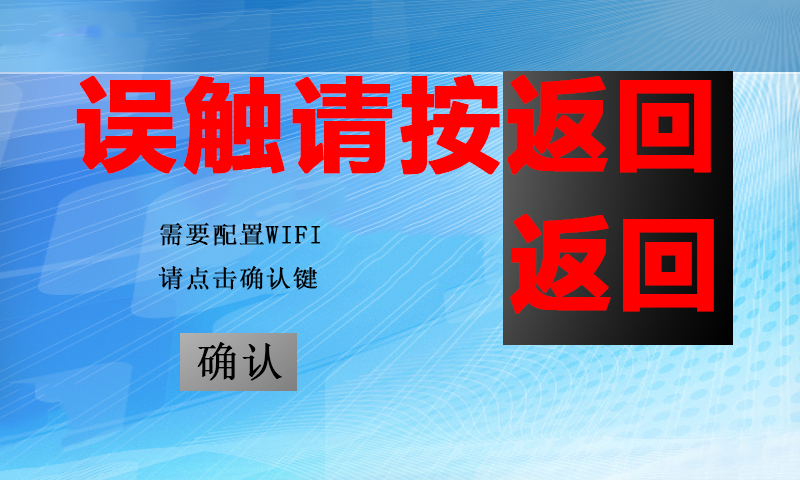
<style>
.page{position:relative;width:800px;height:480px}
.page>*{position:absolute;margin:0}
.t1{font:100px "MicrosoftYaHei-Bold";letter-spacing:0.05em;color:#ff0000;font-weight:bold}
.t2{font:25px "SimSun";letter-spacing:0.05em;color:#000000;font-weight:bold}
.t3{font:41.7px "SimSun";letter-spacing:0.05em;color:#000000;font-weight:bold}
</style>
<div class="page">
<p class="t1" style="left:76px;top:75px;width:635px;height:100px">误触请按返回</p>
<p class="t1" style="left:510px;top:214px;width:204px;height:100px">返回</p>
<p class="t2" style="left:158px;top:223px;width:162px;height:67px">需要配置WIFI<br>请点击确认键</p>
<p class="t3" style="left:197px;top:342px;width:85px;height:39px">确认</p>
</div>
